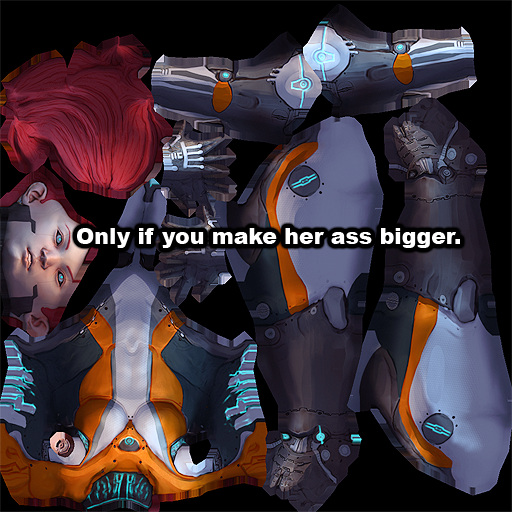
<style>
.page{position:relative;width:512px;height:512px;background:#000000}
.page>*{position:absolute;margin:0}
.t1{font:22px "Arial-Black";color:#ffffff}
</style>
<div class="page">
<p class="t1" style="left:77px;top:228px;width:383px;height:20px">Only if you make her ass bigger.</p>
</div>
